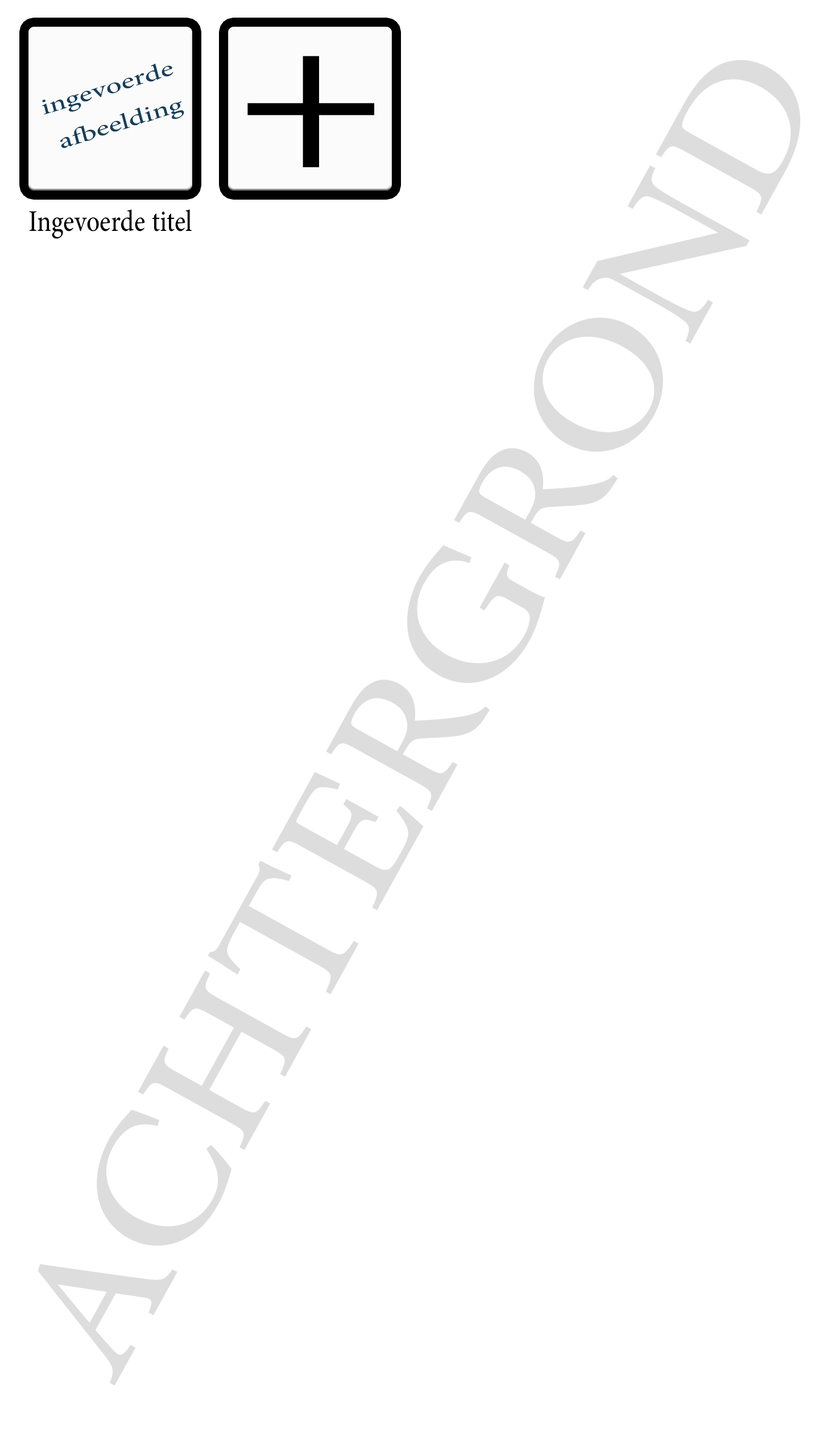
<style>
.page{position:relative;width:819px;height:1456px;background:#ffffff}
.page>*{position:absolute;margin:0}
.t1{font:31.4px "AdobeArabic-Regular";color:#123e5d;scale:1.35 1}
.t2{font:42.3px "AdobeArabic-Regular";color:#000000;scale:0.84 1}
</style>
<div class="page">
<p class="t1" style="left:42px;top:63px;width:142px;height:85px;text-align:center;rotate:-17deg">ingevoerde <br>afbeelding</p>
<p class="t2" style="left:29px;top:209px;width:163px;height:30px">Ingevoerde titel</p>
</div>
